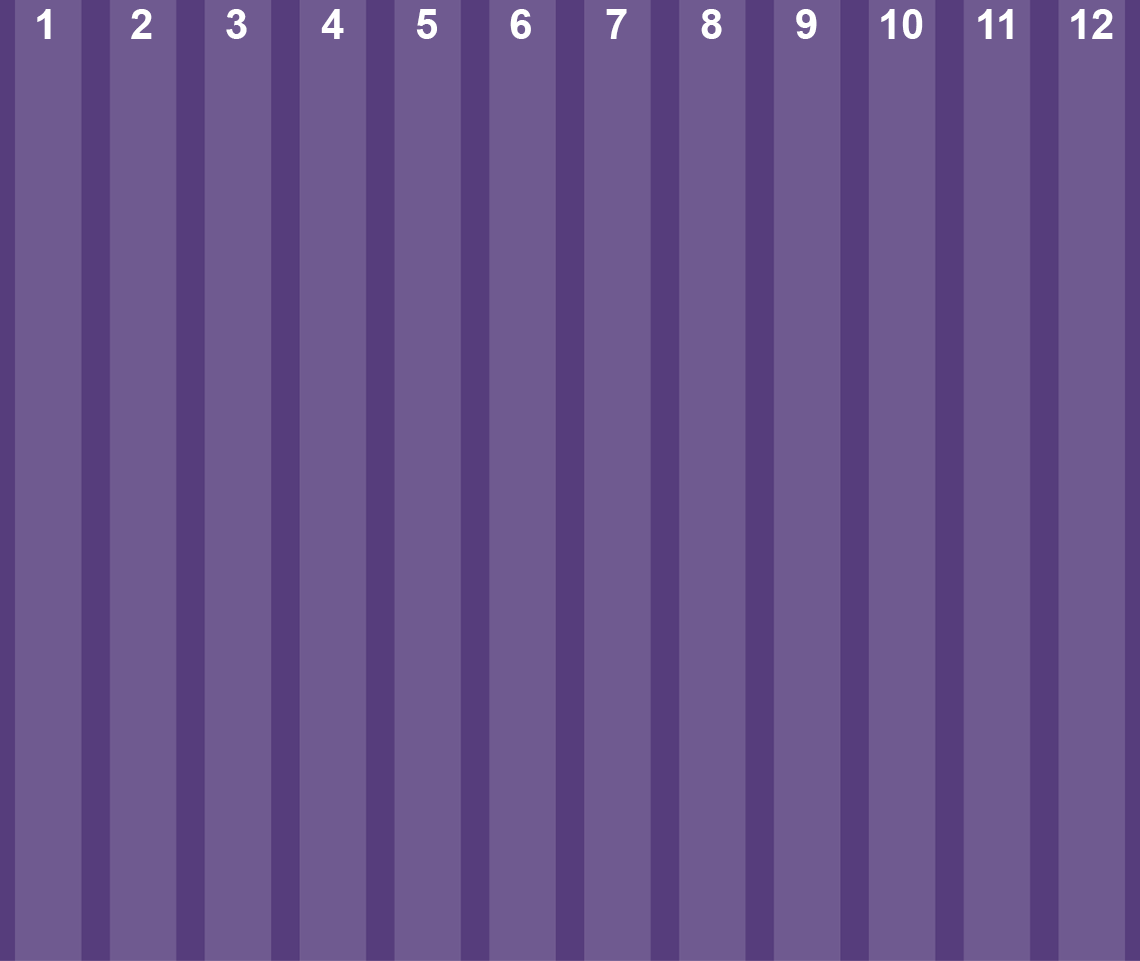
<style>
.page{position:relative;width:1140px;height:961px;background:#6f5a90}
.page>*{position:absolute;margin:0}
.t1{font:42px "Arial-BoldMT";color:#ffffff}
</style>
<div class="page">
<p class="t1" style="left:37px;top:9px;width:14px;height:30px">1</p>
<p class="t1" style="left:131px;top:9px;width:21px;height:30px">2</p>
<p class="t1" style="left:226px;top:9px;width:21px;height:30px">3</p>
<p class="t1" style="left:321px;top:9px;width:23px;height:30px">4</p>
<p class="t1" style="left:416px;top:9px;width:21px;height:30px">5</p>
<p class="t1" style="left:510px;top:9px;width:21px;height:30px">6</p>
<p class="t1" style="left:606px;top:9px;width:21px;height:30px">7</p>
<p class="t1" style="left:701px;top:9px;width:21px;height:30px">8</p>
<p class="t1" style="left:796px;top:9px;width:21px;height:30px">9</p>
<p class="t1" style="left:881px;top:9px;width:42px;height:30px">10</p>
<p class="t1" style="left:978px;top:9px;width:35px;height:30px">11</p>
<p class="t1" style="left:1071px;top:9px;width:42px;height:30px">12</p>
</div>
